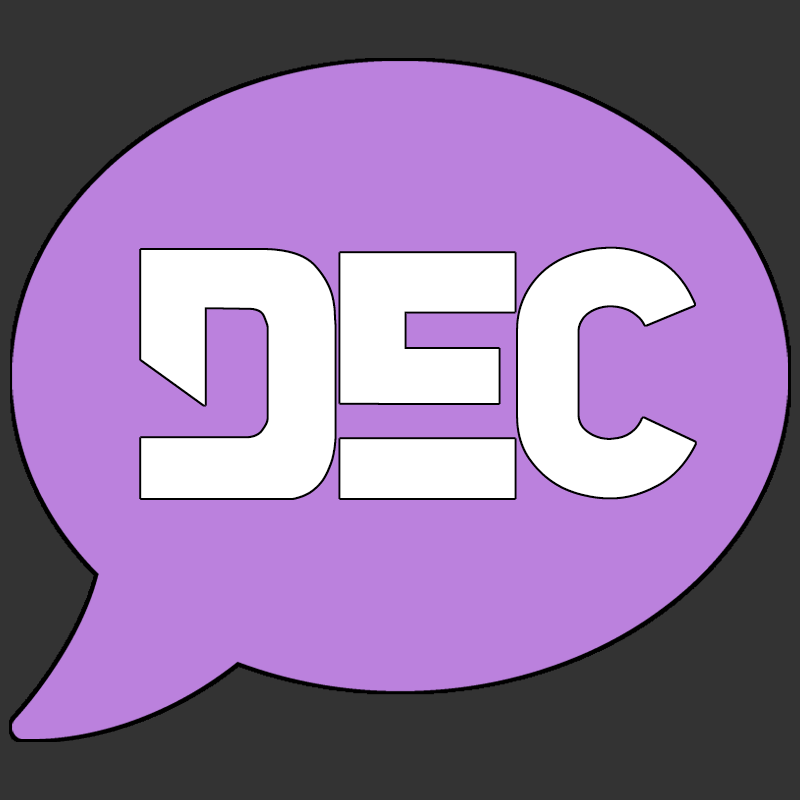
<style>
.page{position:relative;width:800px;height:800px;background:#bb81dd}
.page>*{position:absolute;margin:0}
.t1{font:345.9px "DiscordFont_by_Marvin";letter-spacing:-0.01em;color:#ffffff}
</style>
<div class="page">
<p class="t1" style="left:141px;top:248px;width:554px;height:250px">DEC</p>
</div>
